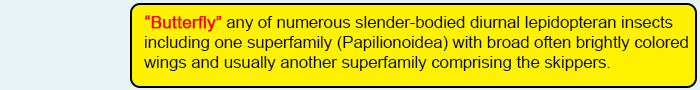
<style>
.page{position:relative;width:700px;height:90px;background:#fff200}
.page>*{position:absolute;margin:0}
.t1{font:16.7px "ArialMT";color:#0e0f0f}
.t2{font:16.7px "ArialMT";color:#0e0f0f;font-weight:bold}
.t3{font:16.7px "ArialMT";color:#fe010d;font-weight:bold}
</style>
<div class="page">
<p class="t1" style="left:144px;top:15px;width:544px;height:56px"><span class="t2"> </span><span class="t3">“Butterfly” </span>any of numerous slender-bodied diurnal lepidopteran insects<br> including one superfamily (Papilionoidea) with broad often brightly colored<br> wings and usually another superfamily comprising the skippers.</p>
</div>
